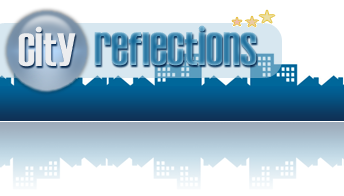
<style>
.page{position:relative;width:344px;height:196px;background:#ffffff}
.page>*{position:absolute;margin:0}
.t1{font:48px "Establo";color:#ecedef}
.t2{font:48px "Establo";color:#3c85ad}
</style>
<div class="page">
<p class="t1" style="left:18px;top:26px;width:58px;height:41px">City</p>
<p class="t2" style="left:94px;top:25px;width:163px;height:41px">Reflections</p>
</div>
